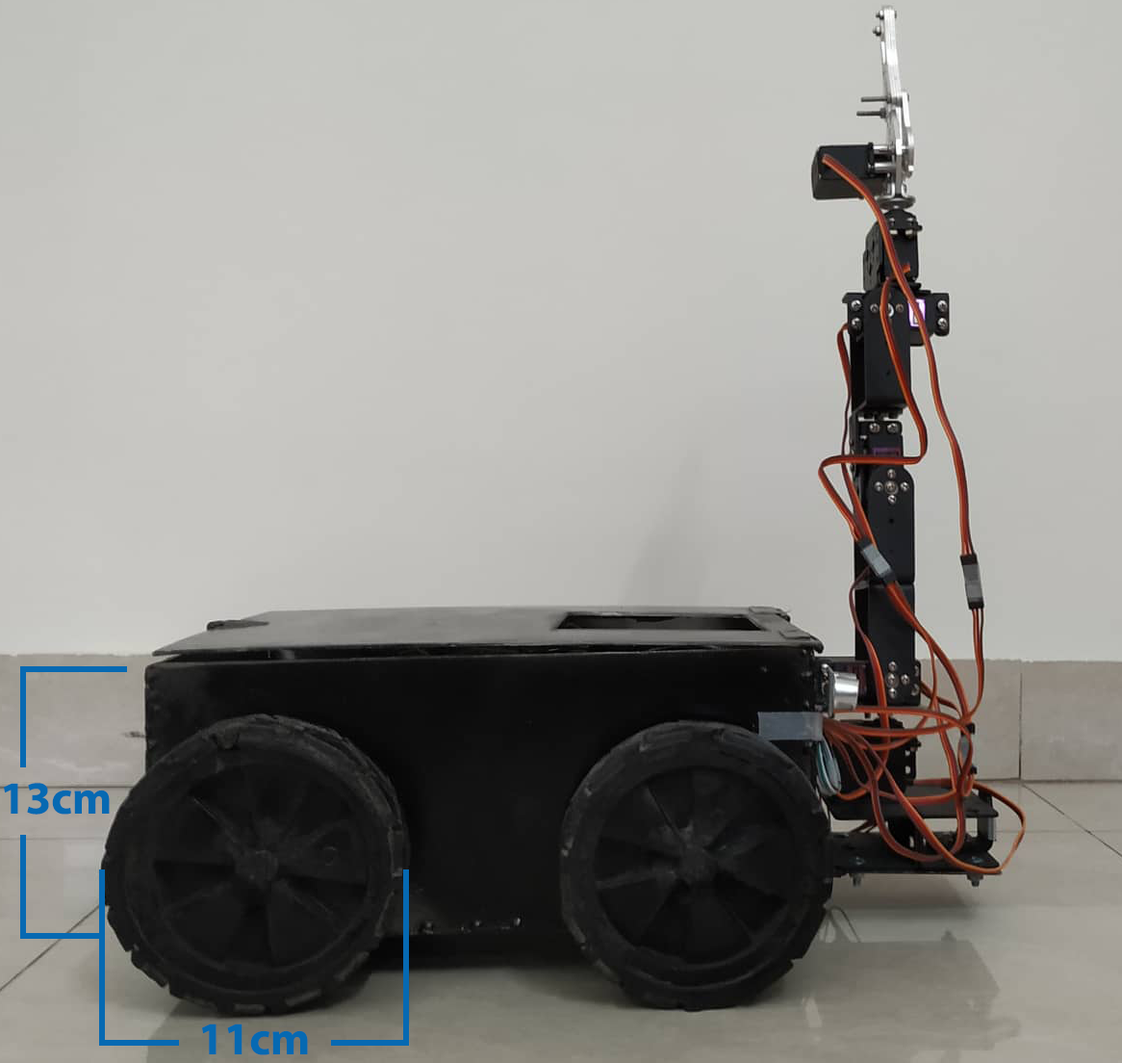
<style>
.page{position:relative;width:1122px;height:1063px}
.page>*{position:absolute;margin:0}
.t1{font:46.2px "MyriadPro-Bold";color:#0669b2}
</style>
<div class="page">
<p class="t1" style="left:4px;top:782px;width:106px;height:32px">13cm</p>
<p class="t1" style="left:202px;top:1023px;width:106px;height:32px">11cm</p>
</div>
